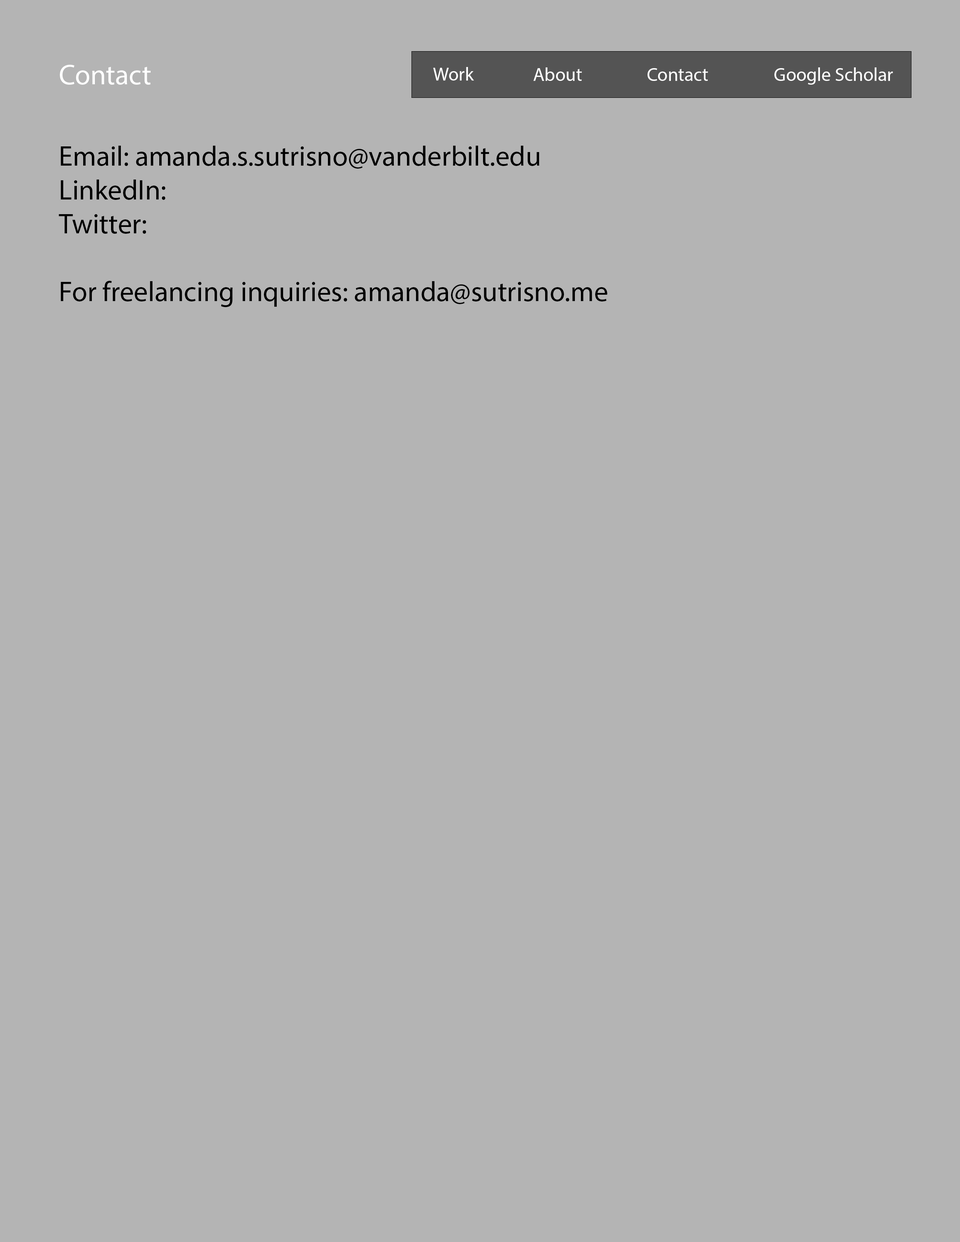
<style>
.page{position:relative;width:960px;height:1242px;background:#b4b4b4}
.page>*{position:absolute;margin:0}
.t1{font:28.2px "MyriadPro-Regular";color:#ffffff}
.t2{font:18.8px "MyriadPro-Regular";color:#ffffff}
.t3{font:28.2px "MyriadPro-Regular";color:#000000}
</style>
<div class="page">
<p class="t1" style="left:60px;top:65px;width:91px;height:20px">Contact</p>
<p class="t2" style="left:433px;top:67px;width:41px;height:14px">Work</p>
<p class="t2" style="left:533px;top:67px;width:49px;height:14px">About</p>
<p class="t2" style="left:647px;top:68px;width:61px;height:13px">Contact</p>
<p class="t2" style="left:774px;top:67px;width:119px;height:18px">Google Scholar</p>
<p class="t3" style="left:59px;top:146px;width:548px;height:161px">Email: amanda.s.sutrisno@vanderbilt.edu<br>LinkedIn:<br>Twitter:<br><br>For freelancing inquiries: amanda@sutrisno.me</p>
</div>
